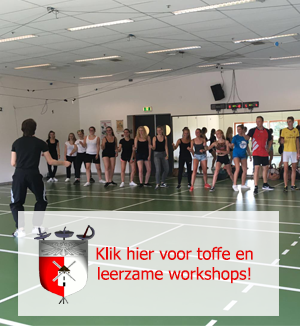
<style>
.page{position:relative;width:300px;height:326px}
.page>*{position:absolute;margin:0}
.t1{font:16.7px "Tahoma";color:#e90909}
</style>
<div class="page">
<p class="t1" style="left:96px;top:246px;width:157px;height:38px;text-align:center">Klik hier voor toffe en leerzame workshops!</p>
</div>
